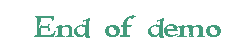
<style>
.page{position:relative;width:250px;height:50px;background:#ffffff}
.page>*{position:absolute;margin:0}
.t1{font:30px "Immortal";color:#449c7c}
</style>
<div class="page">
<p class="t1" style="left:34px;top:15px;width:187px;height:23px">End of demo</p>
</div>
